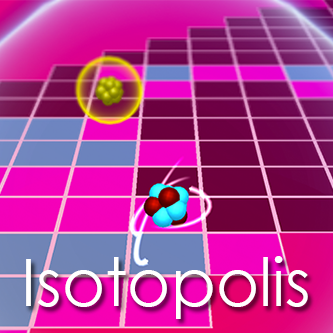
<style>
.page{position:relative;width:333px;height:333px}
.page>*{position:absolute;margin:0}
.t1{font:66.1px "CenturyGothic";color:#ffffff}
</style>
<div class="page">
<p class="t1" style="left:26px;top:256px;width:282px;height:63px">Isotopolis</p>
</div>
